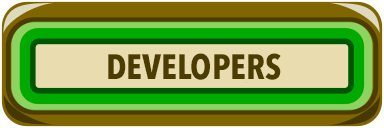
<style>
.page{position:relative;width:384px;height:128px;background:#e9ddaf}
.page>*{position:absolute;margin:0}
.t1{font:35px "AvenirNextCondensed-Bold";color:#4c3c00}
</style>
<div class="page">
<p class="t1" style="left:108px;top:53px;width:173px;height:27px">DEVELOPERS</p>
</div>
